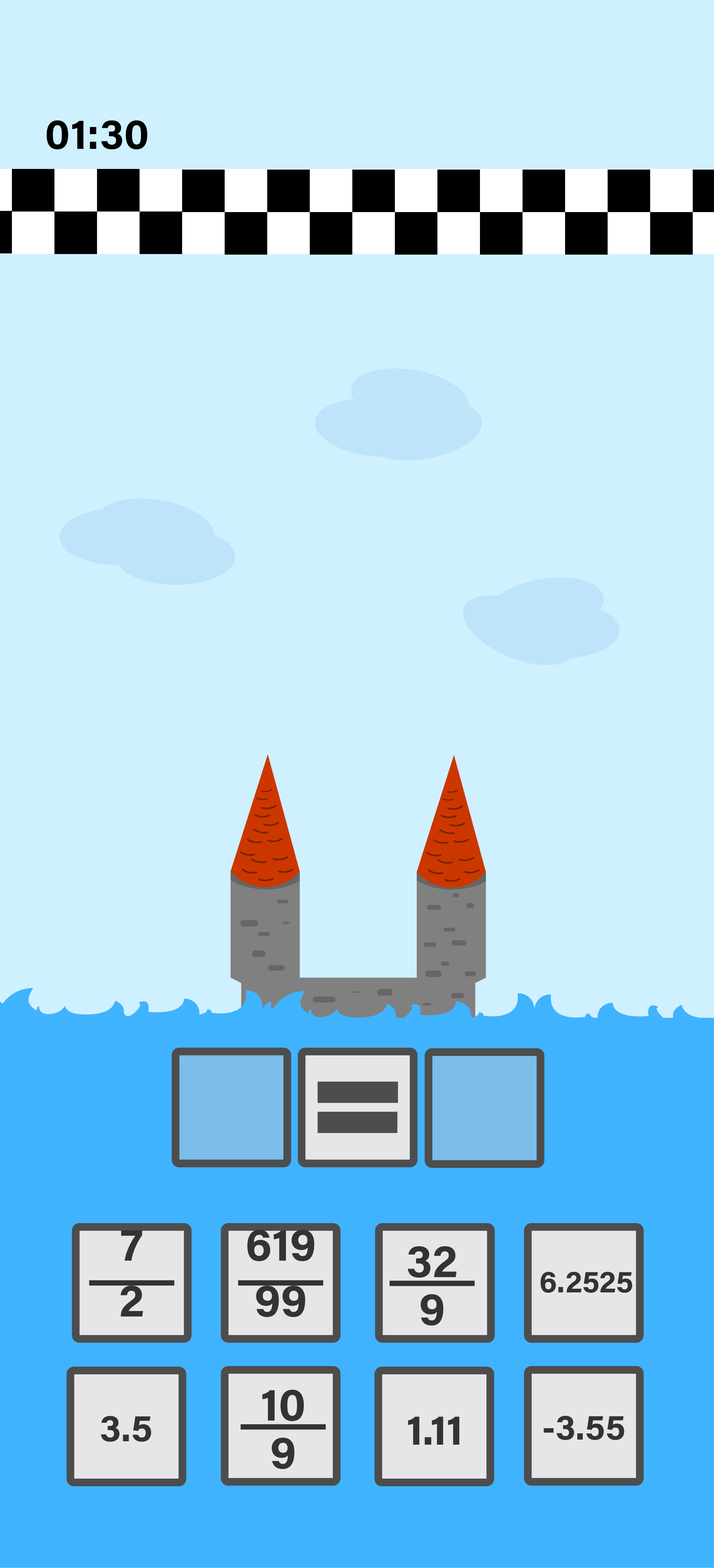
<style>
.page{position:relative;width:714px;height:1568px;background:#cff0ff}
.page>*{position:absolute;margin:0}
.t1{font:42.5px "AcuminConcept-Bold";color:#000000}
.t2{font:46.1px "AcuminConcept-Bold";color:#333333}
.t3{font:30.7px "AcuminConcept-Bold";color:#333333}
.t4{font:37.8px "AcuminConcept-Bold";color:#333333}
.t5{font:42.5px "AcuminConcept-Bold";color:#333333}
.t6{font:35.4px "AcuminConcept-Bold";color:#333333}
</style>
<div class="page">
<p class="t1" style="left:47px;top:120px;width:100px;height:29px">01:30</p>
<p class="t2" style="left:247px;top:1230px;width:67px;height:31px">619</p>
<p class="t2" style="left:121px;top:1230px;width:21px;height:31px">7</p>
<p class="t2" style="left:407px;top:1246px;width:50px;height:32px">32</p>
<p class="t3" style="left:540px;top:1272px;width:92px;height:21px">6.2525</p>
<p class="t2" style="left:121px;top:1286px;width:22px;height:30px">2</p>
<p class="t2" style="left:256px;top:1286px;width:49px;height:31px">99</p>
<p class="t2" style="left:420px;top:1294px;width:23px;height:32px">9</p>
<p class="t2" style="left:262px;top:1390px;width:42px;height:31px">10</p>
<p class="t4" style="left:101px;top:1416px;width:50px;height:26px">3.5</p>
<p class="t5" style="left:408px;top:1417px;width:51px;height:28px">1.11</p>
<p class="t6" style="left:543px;top:1416px;width:81px;height:24px">-3.55</p>
<p class="t2" style="left:271px;top:1438px;width:23px;height:31px">9</p>
</div>
